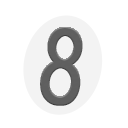
<style>
.page{position:relative;width:128px;height:128px;background:#ffffff}
.page>*{position:absolute;margin:0}
.t1{font:171.1px "MicrosoftYaHeiUI";color:#5f5f5f;font-weight:bold;scale:0.77 1}
</style>
<div class="page">
<p class="t1" style="left:40px;top:27px;width:43px;height:79px;rotate:9deg">8</p>
</div>
